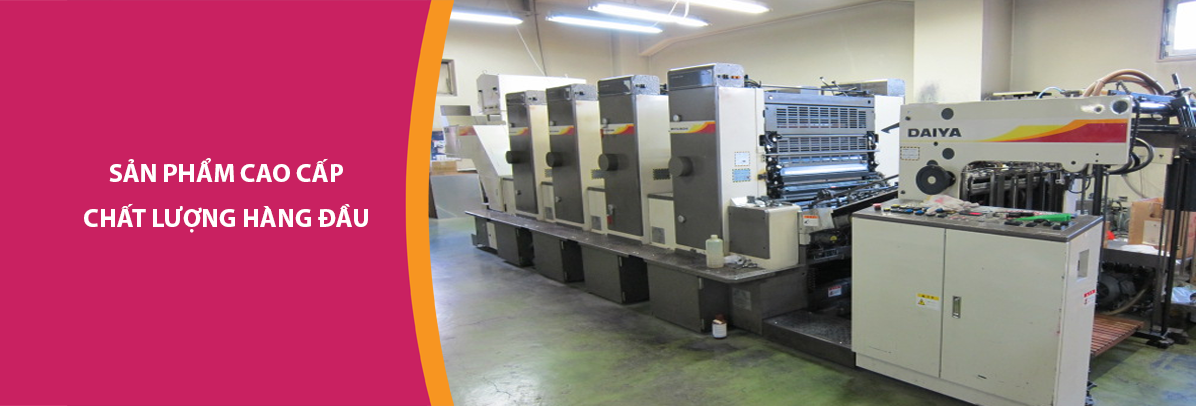
<style>
.page{position:relative;width:1196px;height:406px;background:#c92161}
.page>*{position:absolute;margin:0}
.t1{font:25.5px "MyriadPro-Bold";color:#ffffff}
</style>
<div class="page">
<p class="t1" style="left:109px;top:158px;width:234px;height:24px">SẢN PHẨM CAO CẤP</p>
<p class="t1" style="left:84px;top:203px;width:284px;height:30px">CHẤT LƯỢNG HÀNG ĐẦU</p>
</div>
